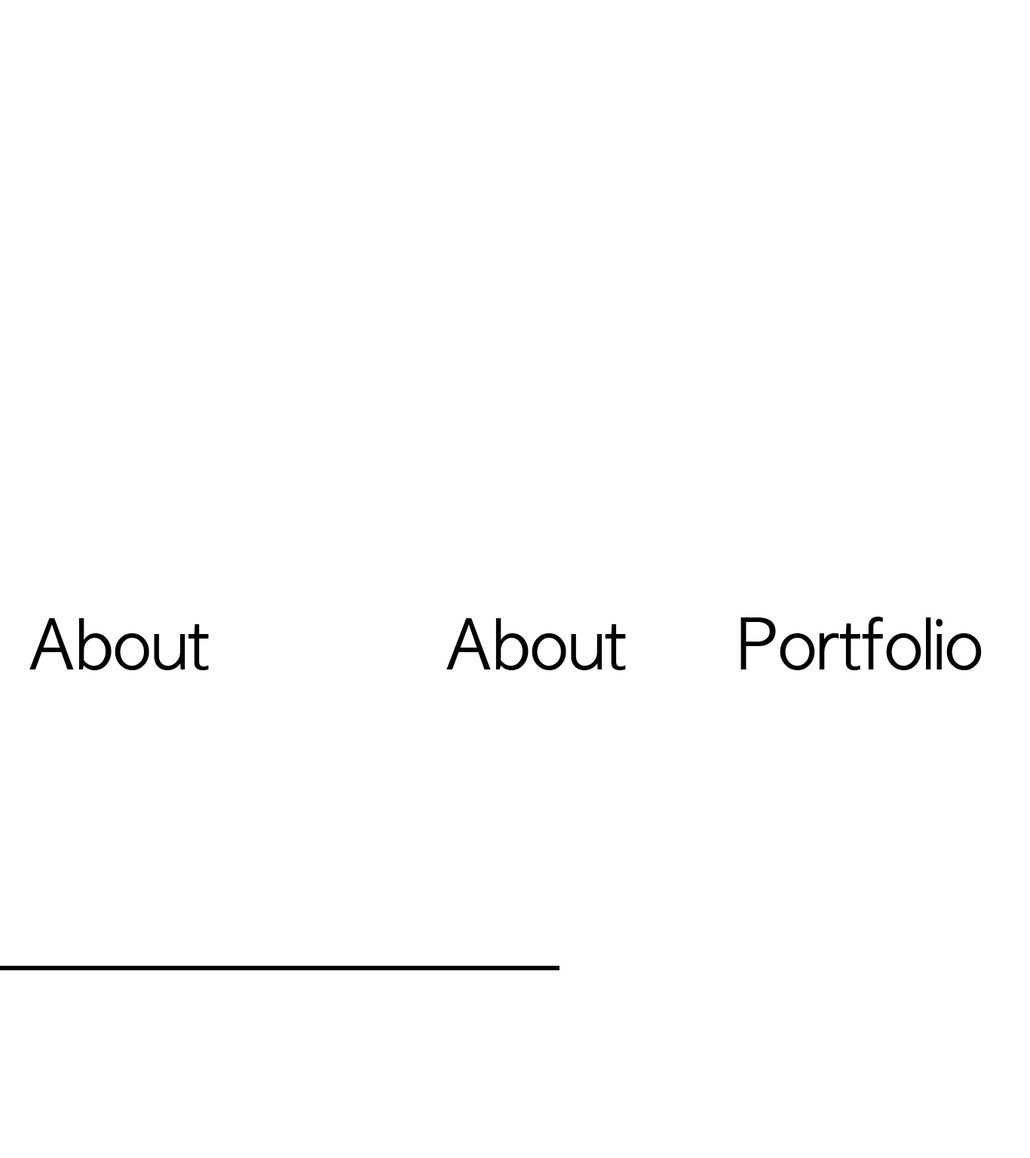
<style>
.page{position:relative;width:1030px;height:1158px;background:#ffffff}
.page>*{position:absolute;margin:0}
.t1{font:66px "AppleGothic";color:#000000}
.t2{font:65.9px "AppleGothic";color:#000000}
</style>
<div class="page">
<p class="t1" style="left:740px;top:617px;width:242px;height:53px">Portfolio</p>
<p class="t2" style="left:29px;top:618px;width:180px;height:52px">About</p>
<p class="t2" style="left:446px;top:618px;width:180px;height:52px">About</p>
</div>
